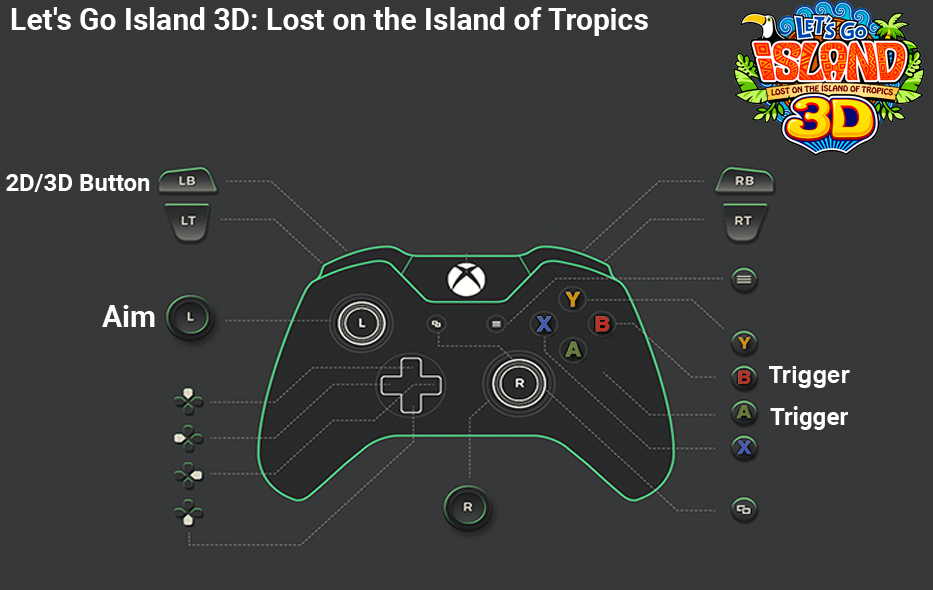
<style>
.page{position:relative;width:933px;height:590px;background:#363838}
.page>*{position:absolute;margin:0}
.t1{font:30px "Roboto-Bold";color:#ffffff}
.t2{font:24px "Roboto-Bold";color:#ffffff}
.t3{font:30px "Roboto-Bold";color:#fefefe}
.t4{font:24px "Arial-BoldMT";color:#fefefe}
</style>
<div class="page">
<p class="t1" style="left:11px;top:7px;width:637px;height:29px">Let's Go Island 3D: Lost on the Island of Tropics</p>
<p class="t2" style="left:6px;top:174px;width:144px;height:18px">2D/3D Button</p>
<p class="t3" style="left:102px;top:305px;width:53px;height:22px">Aim</p>
<p class="t4" style="left:769px;top:366px;width:81px;height:22px">Trigger</p>
<p class="t2" style="left:770px;top:406px;width:78px;height:24px">Trigger</p>
</div>
